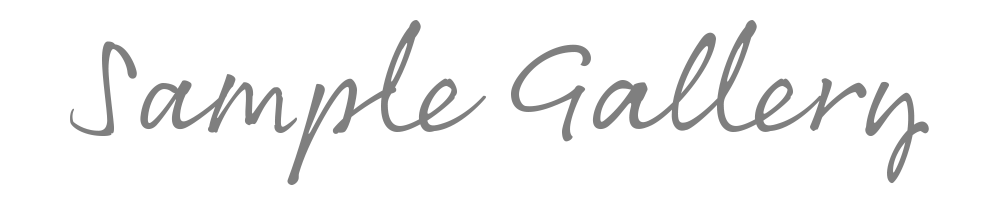
<style>
.page{position:relative;width:1000px;height:200px;background:#ffffff}
.page>*{position:absolute;margin:0}
.t1{font:137.3px "Rollerscript-Smooth";color:#7f7f7f}
</style>
<div class="page">
<p class="t1" style="left:70px;top:20px;width:859px;height:165px">Sample Gallery</p>
</div>
